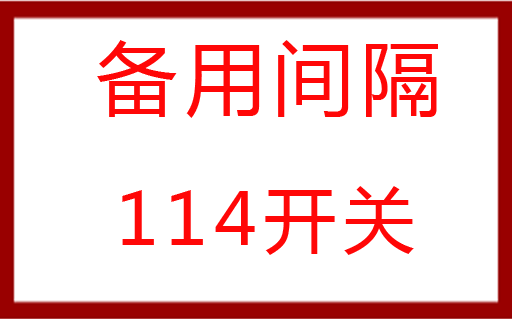
<style>
.page{position:relative;width:512px;height:319px;background:#ffffff}
.page>*{position:absolute;margin:0}
.t1{font:80px "MicrosoftYaHei";letter-spacing:0.1em;color:#ff0707}
.t2{font:72px "MicrosoftYaHei";letter-spacing:0.1em;color:#ff0707}
</style>
<div class="page">
<p class="t1" style="left:97px;top:40px;width:341px;height:78px">备用间隔</p>
<p class="t2" style="left:122px;top:186px;width:292px;height:69px">114开关</p>
</div>
